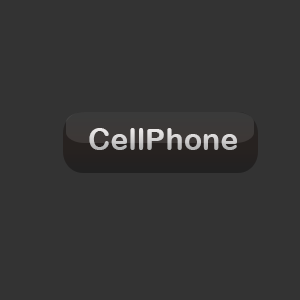
<style>
.page{position:relative;width:300px;height:300px;background:#333333}
.page>*{position:absolute;margin:0}
.t1{font:12px "ArialRoundedMTBold"}
</style>
<div class="page">
<p class="t1" style="left:89px;top:128px;width:148px;height:22px">CellPhone</p>
</div>
